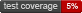
<style>
.page{position:relative;width:82px;height:13px}
.page>*{position:absolute;margin:0}
.t1{font:10px "ArialMT";color:#cccccc;scale:0.9 1}
.t2{font:8px "Helvetica";color:#ffffff}
</style>
<div class="page">
<p class="t1" style="left:3px;top:2px;width:55px;height:9px">test coverage</p>
<p class="t2" style="left:66px;top:3px;width:12px;height:6px">5%</p>
</div>
